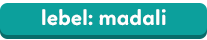
<style>
.page{position:relative;width:207px;height:40px;background:#0ca09c}
.page>*{position:absolute;margin:0}
.t1{font:22px "Linotte-Bold";color:#ffffff}
</style>
<div class="page">
<p class="t1" style="left:42px;top:9px;width:124px;height:17px">lebel: madali</p>
</div>
